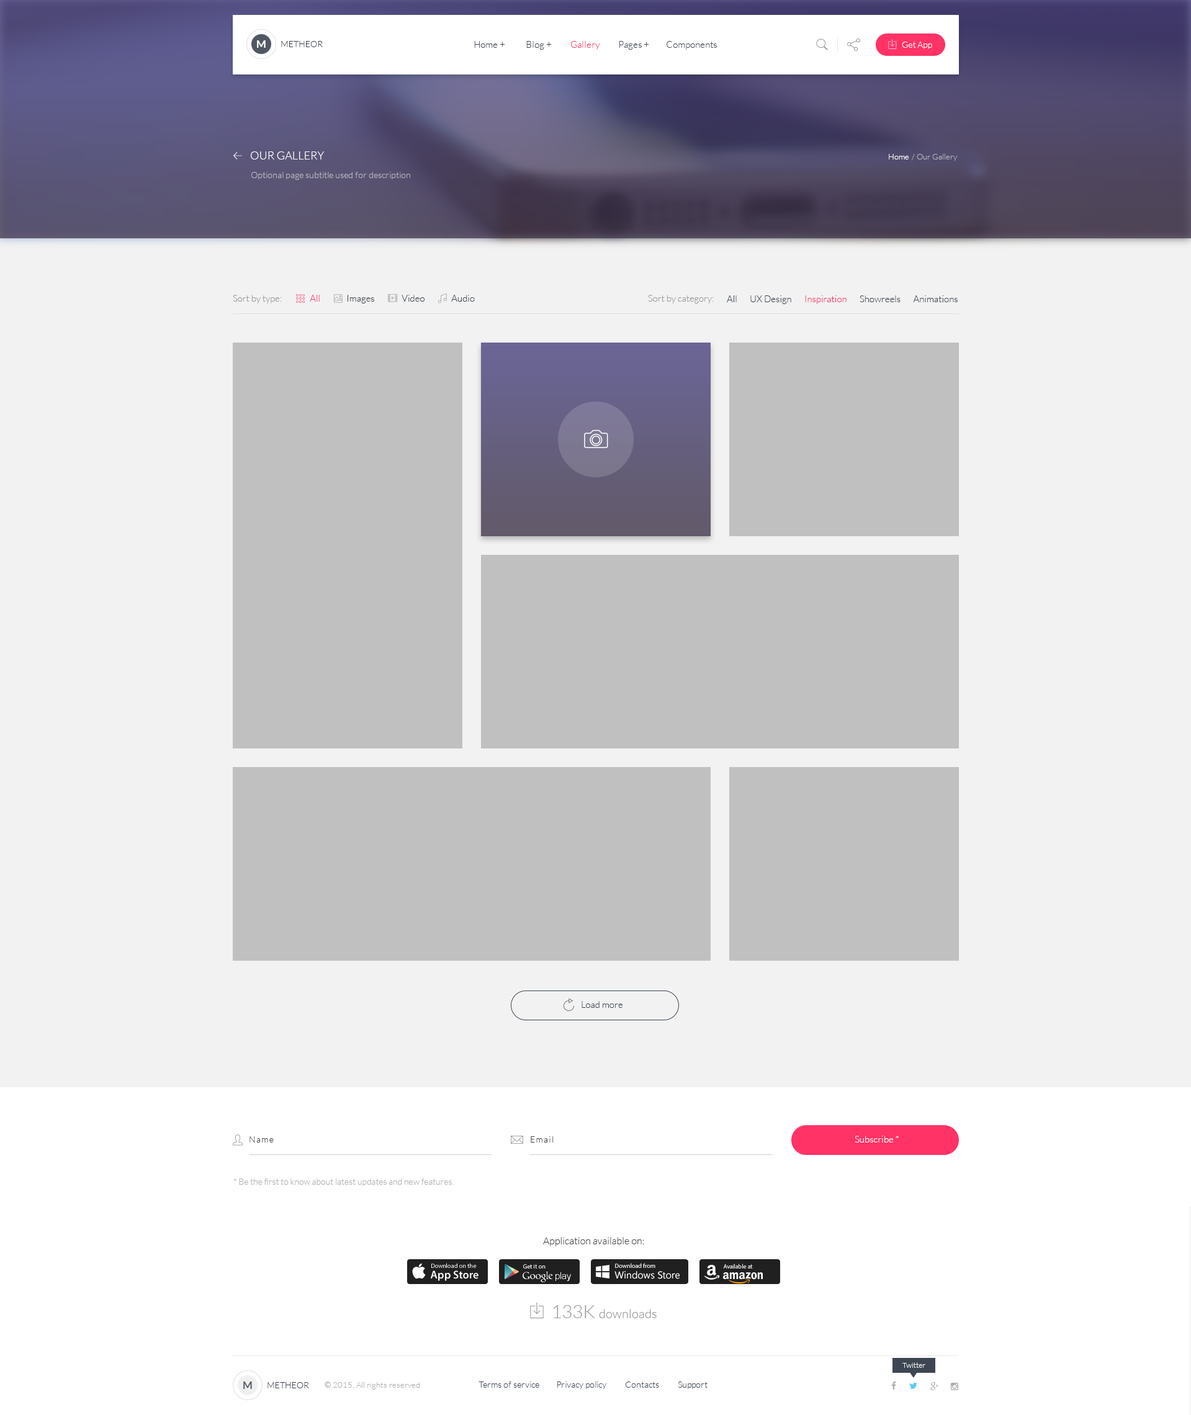
<style>
.page{position:relative;width:1191px;height:1415px;background:#f2f2f2}
.page>*{position:absolute;margin:0}
.t1{font:10.6px "Lato-Bold";color:#ffffff}
.t2{font:8.7px "Lato-Light";color:#3d4652}
.t3{font:9.3px "Lato-Light";color:#3d4652}
.t4{font:9.3px "Lato-Light";color:#ff3366}
.t5{font:8.7px "Lato-Light";color:#fefefe}
.t6{font:11.2px "Lato-Light";color:#ffffff;text-transform:uppercase}
.t7{font:8.1px "Lato-Light";color:#fefefe}
.t8{font:8.1px "Lato-Light";color:#b6b4bf}
.t9{font:8.7px "Lato-Light";color:#b9b7c2}
.t10{font:9.3px "Lato-Light";color:#999999}
.t11{font:8.7px "Lato-Light";letter-spacing:0.1em;color:#404040}
.t12{font:9.3px "Lato-Light";color:#ffffff}
.t13{font:8.7px "Lato-Light";color:#b0b0b0}
.t14{font:9.9px "Lato-Light";color:#404040}
.t15{font:6.2px/10.6px "MyriadPro-Regular";color:#ffffff}
.t16{font:11.2px/10.6px "MyriadPro-Semibold";color:#ffffff}
.t17{font:6.2px "MyriadPro-Regular";color:#ffffff}
.t18{font:9.9px "SegoeUI";color:#ffffff}
.t19{font:12.4px "Lato-Light";color:#999999}
.t20{font:18.6px "Lato-Light";color:#999999}
.t21{font:7.4px "Lato-Light";color:#ffffff}
.t22{font:10.6px "Lato-Bold";color:#575e67}
.t23{font:8.1px "Lato-Light";color:#aeaeae}
.t24{font:8.1px "Lato-Regular";color:#aeaeae}
</style>
<div class="page">
<p class="t1" style="left:257px;top:40px;width:9px;height:8px">M</p>
<p class="t2" style="left:281px;top:41px;width:42px;height:6px">METHEOR</p>
<p class="t3" style="left:474px;top:41px;width:243px;height:9px">Home +           Blog +          <span class="t4">Gallery</span>          Pages +         Components</p>
<p class="t5" style="left:902px;top:42px;width:30px;height:7px">Get App</p>
<p class="t6" style="left:250px;top:151px;width:75px;height:9px">Our Gallery</p>
<p class="t7" style="left:889px;top:154px;width:20px;height:6px">Home</p>
<p class="t8" style="left:911px;top:153px;width:47px;height:8px">/ Our Gallery</p>
<p class="t9" style="left:251px;top:172px;width:159px;height:8px">Optional page subtitle used for description</p>
<p class="t10" style="left:233px;top:295px;width:49px;height:9px">Sort by type:</p>
<p class="t4" style="left:310px;top:295px;width:10px;height:7px">All</p>
<p class="t3" style="left:348px;top:295px;width:26px;height:9px">Images</p>
<p class="t3" style="left:402px;top:295px;width:23px;height:7px">Video</p>
<p class="t3" style="left:451px;top:295px;width:24px;height:7px">Audio</p>
<p class="t10" style="left:648px;top:295px;width:66px;height:9px">Sort by category:</p>
<p class="t3" style="left:727px;top:295px;width:231px;height:9px">All       UX Design       <span class="t4">Inspiration</span>       Showreels       Animations</p>
<p class="t3" style="left:582px;top:1001px;width:41px;height:7px">Load more</p>
<p class="t11" style="left:250px;top:1136px;width:24px;height:7px">Name</p>
<p class="t11" style="left:531px;top:1136px;width:23px;height:7px">Email</p>
<p class="t12" style="left:855px;top:1136px;width:44px;height:7px">Subscribe *</p>
<p class="t13" style="left:233px;top:1179px;width:221px;height:7px">* Be the first to know about latest updates and new features.</p>
<p class="t14" style="left:543px;top:1237px;width:101px;height:9px">Application available on:</p>
<p class="t15" style="left:430px;top:1263px;width:49px;height:18px">Download on the<br><span class="t16">App Store</span></p>
<p class="t17" style="left:523px;top:1264px;width:23px;height:5px">Get it on</p>
<p class="t17" style="left:615px;top:1263px;width:40px;height:5px">Download from</p>
<p class="t17" style="left:723px;top:1264px;width:30px;height:5px">Available at</p>
<p class="t18" style="left:614px;top:1271px;width:66px;height:8px">Windows Store</p>
<p class="t19" style="left:553px;top:1305px;width:104px;height:13px"><span class="t20">133K </span>downloads</p>
<p class="t21" style="left:902px;top:1362px;width:23px;height:6px">Twitter</p>
<p class="t22" style="left:243px;top:1382px;width:9px;height:7px">M</p>
<p class="t2" style="left:268px;top:1382px;width:41px;height:6px">METHEOR</p>
<p class="t23" style="left:325px;top:1382px;width:95px;height:8px"><span class="t24">© </span>2015. All rights reserved</p>
<p class="t2" style="left:479px;top:1382px;width:229px;height:7px">Terms of service         Privacy policy          Contacts          Support</p>
</div>
